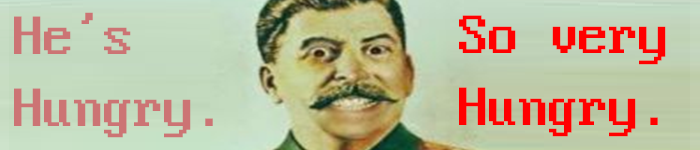
<style>
.page{position:relative;width:700px;height:150px}
.page>*{position:absolute;margin:0}
.t1{font:60px "PxPlus_IBM_VGA8";color:#cc7474}
.t2{font:60px "PxPlus_IBM_VGA8";color:#ff0000}
</style>
<div class="page">
<p class="t1" style="left:14px;top:12px;width:199px;height:126px">He’s<br>Hungry.</p>
<p class="t2" style="left:459px;top:15px;width:207px;height:122px">So very<br>Hungry.</p>
</div>
